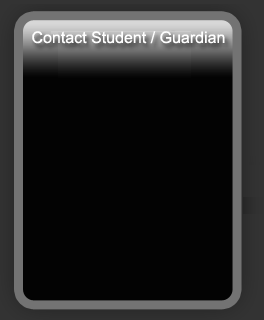
<style>
.page{position:relative;width:264px;height:320px;background:#030303}
.page>*{position:absolute;margin:0}
.t1{font:16px "ArialMT";color:#ffffff}
</style>
<div class="page">
<p class="t1" style="left:32px;top:31px;width:193px;height:13px">Contact Student / Guardian</p>
</div>
